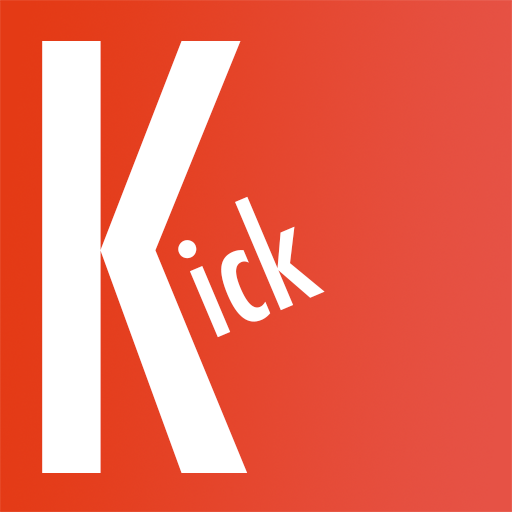
<style>
.page{position:relative;width:512px;height:512px;background:#ffffff}
.page>*{position:absolute;margin:0}
.t1{font:573.4px "Futura-CondensedMedium";color:#ffffff}
.t2{font:141.3px "Futura-CondensedMedium";color:#ffffff}
</style>
<div class="page">
<p class="t1" style="left:42px;top:41px;width:206px;height:432px">K</p>
<p class="t2" style="left:178px;top:196px;width:147px;height:142px;rotate:-23deg">ick</p>
</div>
